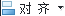
<style>
.page{position:relative;width:65px;height:16px;background:#ffffff}
.page>*{position:absolute;margin:0}
.t1{font:12px "SimSun";letter-spacing:0.5em;color:#1f2429}
</style>
<div class="page">
<p class="t1" style="left:20px;top:2px;width:29px;height:12px">对齐</p>
</div>
